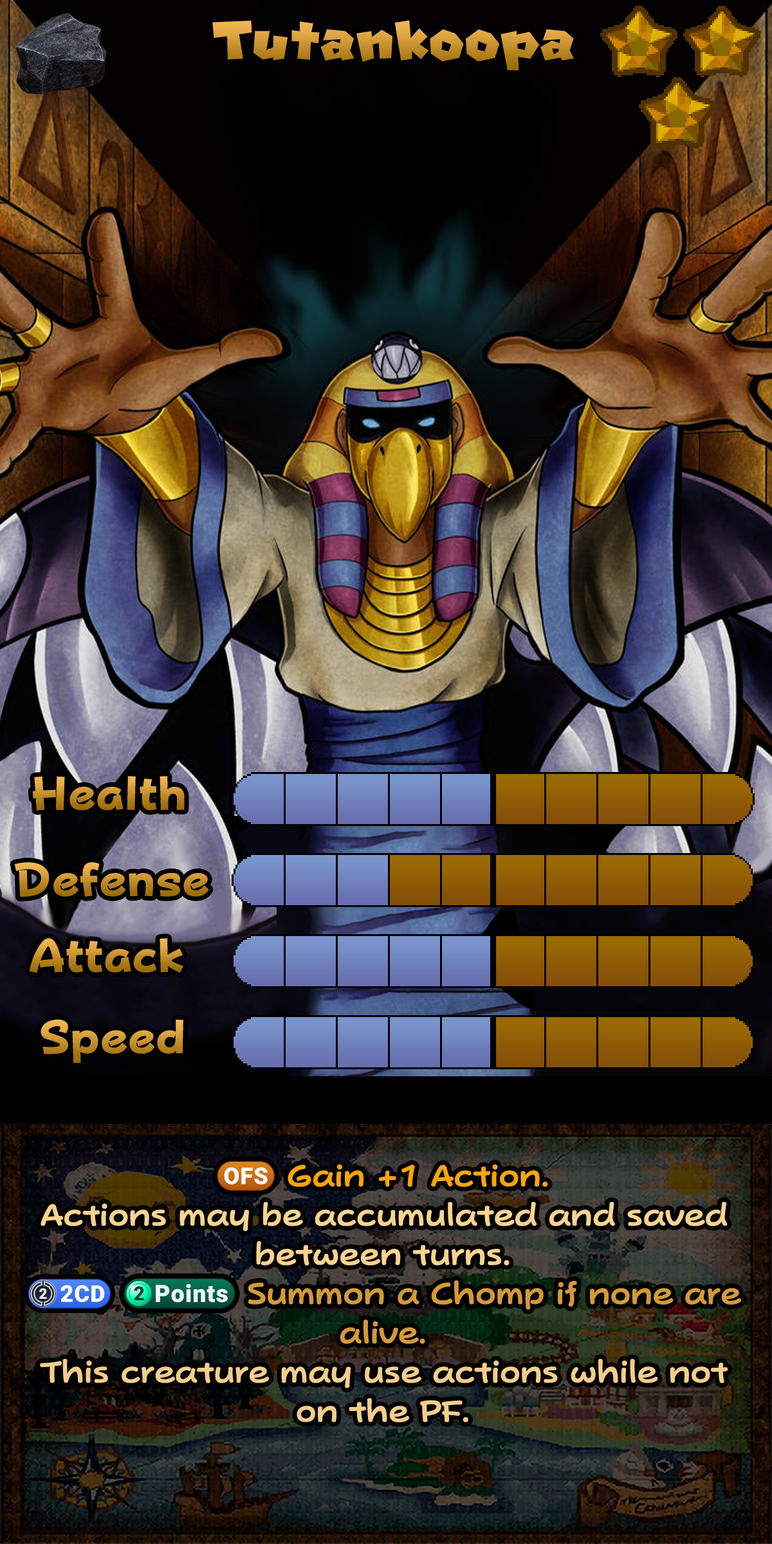
<style>
.page{position:relative;width:772px;height:1544px}
.page>*{position:absolute;margin:0}
.t1{font:130px "SuperMario"}
.t2{font:80.4px "FOTPopHappinessStrp-ExtraBold"}
.t3{font:52.1px/39.3px "PopJoyStd-B";color:#fad38e}
.t4{font:52.1px/39.3px "stoogedings-Regular";color:#f7a600}
.t5{font:52.1px/39.3px "PopJoyStd-B";color:#f7a600}
.t6{font:52.1px/39.3px "stoogedings-Regular";letter-spacing:0.37em;color:#d29a37}
.t7{font:54px/39.3px "stoogedings-Regular";color:#d29a37}
.t8{font:52.1px/39.3px "PopJoyStd-B";color:#d29a37}
.t9{font:52.1px/39.3px "PopJoyStd-B";color:#f3cd8a}
</style>
<div class="page">
<p class="t1" style="left:212px;top:20px;width:362px;height:51px">Tutankoopa</p>
<p class="t2" style="left:32px;top:776px;width:153px;height:35px">Health</p>
<p class="t2" style="left:14px;top:862px;width:195px;height:35px">Defense</p>
<p class="t2" style="left:29px;top:938px;width:154px;height:36px">Attack</p>
<p class="t2" style="left:41px;top:1019px;width:142px;height:45px">Speed</p>
<p class="t3" style="left:28px;top:1161px;width:713px;height:262px;text-align:center"><span class="t4">(OFS)</span><span class="t5"> Gain +1 Action.<br></span>Actions may be accumulated and saved between turns.<br><span class="t6">(2CD)</span><span class="t7">(2 points)</span><span class="t8"> Summon a Chomp if none are alive.<br></span><span class="t9">This creature may use actions while not on the PF.</span></p>
</div>
